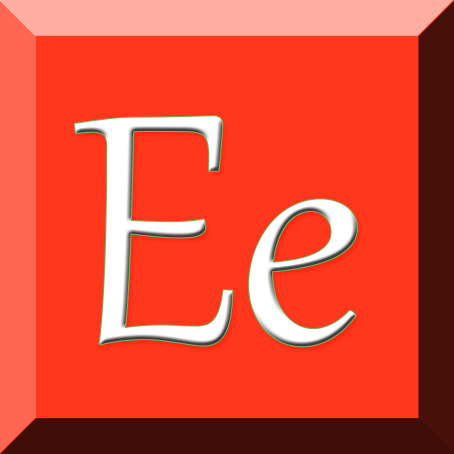
<style>
.page{position:relative;width:454px;height:454px;background:#ff381d}
.page>*{position:absolute;margin:0}
.t1{font:400px "Gabriola";color:#ffffff}
</style>
<div class="page">
<p class="t1" style="left:74px;top:116px;width:283px;height:231px">Ee</p>
</div>
